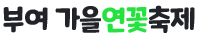
<style>
.page{position:relative;width:200px;height:40px;background:#ffffff}
.page>*{position:absolute;margin:0}
.t1{font:28.5px "MaplestoryBold";letter-spacing:-0.025em;color:#222328}
.t2{font:28.5px "MaplestoryBold";letter-spacing:-0.025em;color:#26e241}
</style>
<div class="page">
<p class="t1" style="left:3px;top:5px;width:192px;height:28px">부여 가을<span class="t2">연꽃</span>축제</p>
</div>
